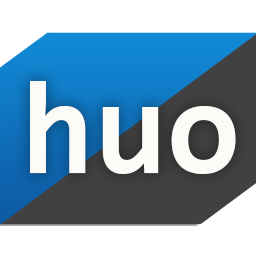
<style>
.page{position:relative;width:256px;height:256px;background:#ffffff}
.page>*{position:absolute;margin:0}
.t1{font:133.3px "Consolas-Bold";color:#fdfbf7}
</style>
<div class="page">
<p class="t1" style="left:30px;top:81px;width:206px;height:93px">huo</p>
</div>
